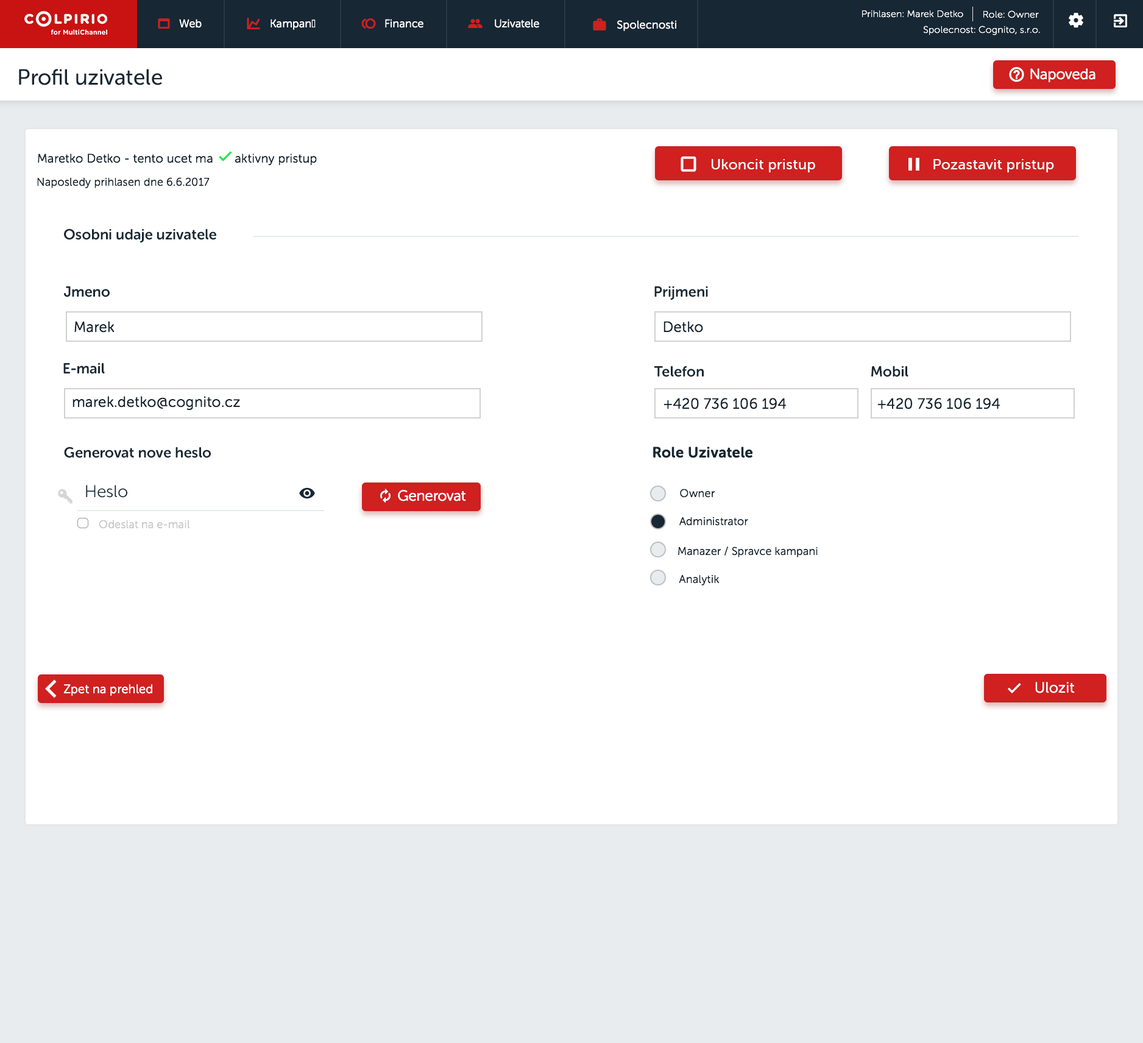
<style>
.page{position:relative;width:1143px;height:1043px;background:#ffffff}
.page>*{position:absolute;margin:0}
.t1{font:9.7px "MuseoSansRounded-100";letter-spacing:0.025em;color:#ffffff}
.t2{font:11px "MuseoSansRounded-300";letter-spacing:0.025em;color:#ffffff}
.t3{font:21.9px "MuseoSansRounded-500";color:#172734}
.t4{font:14.6px "MuseoSansRounded-300";color:#ffffff}
.t5{font:14.6px "MuseoSansRounded-500";letter-spacing:0.025em;color:#ffffff}
.t6{font:11px "MuseoSansRounded-300";letter-spacing:0.025em;color:#172734}
.t7{font:14.6px "MuseoSansRounded-700";color:#172734}
.t8{font:14.6px "MuseoSansRounded-300";letter-spacing:0.025em;color:#172734}
.t9{font:14.6px "MuseoSansRounded-700";letter-spacing:0.025em;color:#172734}
.t10{font:17.1px "MuseoSansRounded-300";color:#172734}
.t11{font:11px "MuseoSansRounded-300";letter-spacing:0.025em;color:#c9c8c8}
.t12{font:12.2px "MuseoSansRounded-300";letter-spacing:0.025em;color:#ffffff}
.t13{font:14.6px "MuseoSansRounded-300";letter-spacing:0.025em;color:#ffffff}
</style>
<div class="page">
<p class="t1" style="left:862px;top:10px;width:101px;height:8px">Prihlasen: Marek Detko</p>
<p class="t1" style="left:983px;top:10px;width:56px;height:8px">Role: Owner</p>
<p class="t2" style="left:179px;top:19px;width:23px;height:9px">Web</p>
<p class="t2" style="left:271px;top:19px;width:45px;height:11px">Kampaně</p>
<p class="t2" style="left:385px;top:19px;width:38px;height:9px">Finance</p>
<p class="t2" style="left:495px;top:19px;width:44px;height:9px">Uzivatele</p>
<p class="t2" style="left:617px;top:20px;width:59px;height:11px">Spolecnosti</p>
<p class="t1" style="left:924px;top:26px;width:116px;height:9px">Spolecnost: Cognito, s.r.o.</p>
<p class="t3" style="left:19px;top:69px;width:143px;height:16px">Profil uzivatele</p>
<p class="t4" style="left:1030px;top:68px;width:66px;height:14px">Napoveda</p>
<p class="t5" style="left:712px;top:159px;width:103px;height:13px">Ukoncit pristup</p>
<p class="t5" style="left:933px;top:159px;width:121px;height:13px">Pozastavit pristup</p>
<p class="t6" style="left:37px;top:177px;width:173px;height:11px">Naposledy prihlasen dne 6.6.2017</p>
<p class="t7" style="left:64px;top:228px;width:152px;height:15px">Osobni udaje uzivatele</p>
<p class="t7" style="left:64px;top:286px;width:46px;height:11px">Jmeno</p>
<p class="t7" style="left:654px;top:286px;width:54px;height:14px">Prijmeni</p>
<p class="t8" style="left:74px;top:321px;width:41px;height:12px">Marek</p>
<p class="t8" style="left:664px;top:321px;width:39px;height:12px">Detko</p>
<p class="t7" style="left:63px;top:363px;width:42px;height:11px">E-mail</p>
<p class="t7" style="left:654px;top:366px;width:50px;height:11px">Telefon</p>
<p class="t7" style="left:871px;top:366px;width:38px;height:11px">Mobil</p>
<p class="t8" style="left:73px;top:396px;width:167px;height:14px">marek.detko@cognito.cz</p>
<p class="t8" style="left:664px;top:398px;width:122px;height:11px">+420 736 106 194</p>
<p class="t8" style="left:877px;top:398px;width:123px;height:11px">+420 736 106 194</p>
<p class="t7" style="left:64px;top:447px;width:147px;height:11px">Generovat nove heslo</p>
<p class="t9" style="left:653px;top:447px;width:100px;height:11px">Role Uzivatele</p>
<p class="t10" style="left:86px;top:485px;width:41px;height:13px">Heslo</p>
<p class="t4" style="left:398px;top:490px;width:68px;height:11px">Generovat</p>
<p class="t6" style="left:680px;top:489px;width:35px;height:9px">Owner</p>
<p class="t11" style="left:99px;top:520px;width:91px;height:9px">Odeslat na e-mail</p>
<p class="t6" style="left:679px;top:517px;width:69px;height:9px">Administrator</p>
<p class="t6" style="left:678px;top:547px;width:140px;height:11px">Manazer / Spravce kampani</p>
<p class="t6" style="left:679px;top:575px;width:41px;height:11px">Analytik</p>
<p class="t12" style="left:63px;top:684px;width:89px;height:12px">Zpet na prehled</p>
<p class="t13" style="left:1035px;top:682px;width:40px;height:11px">Ulozit</p>
</div>
